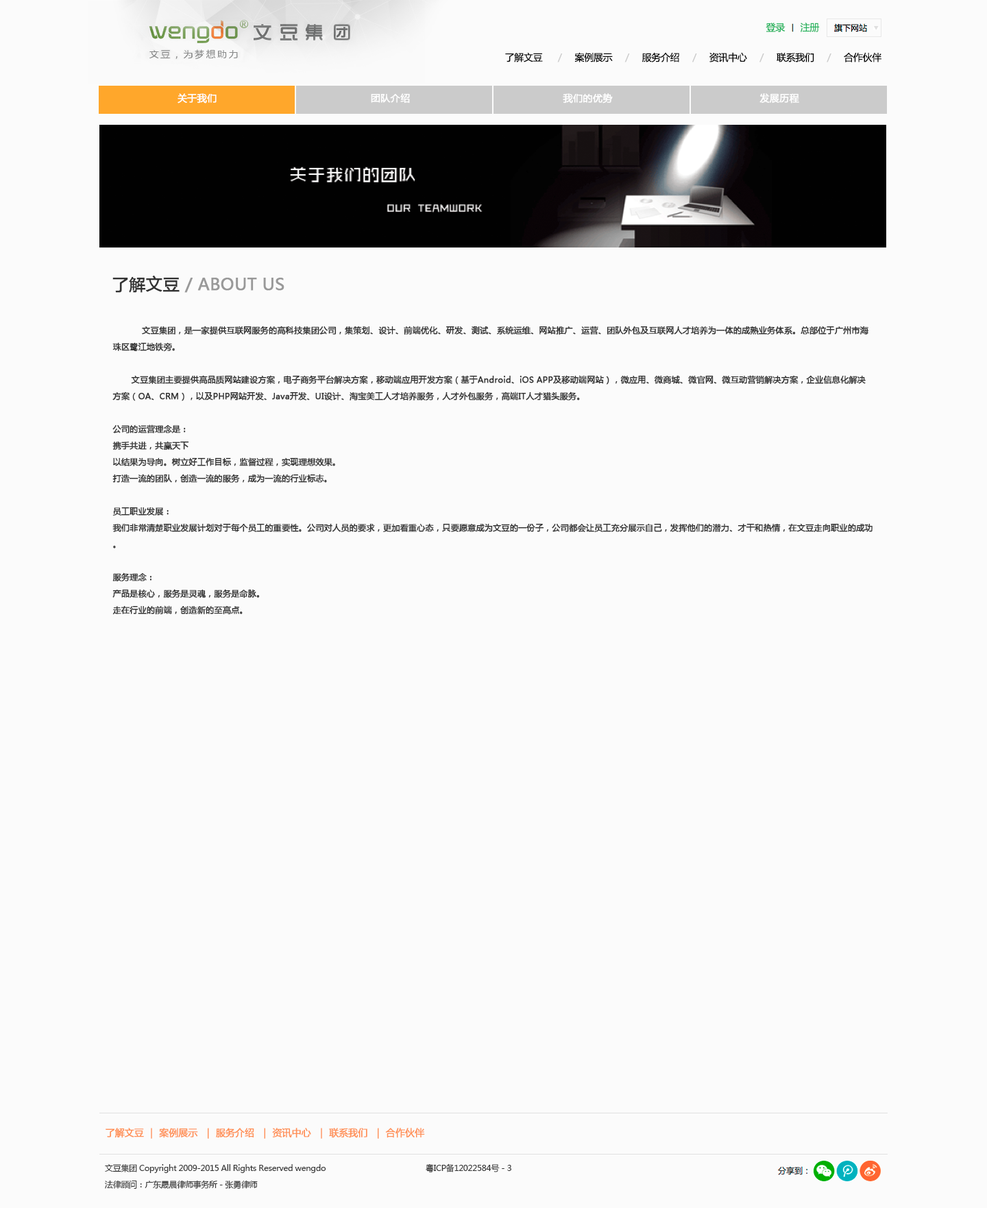
<style>
.page{position:relative;width:987px;height:1208px;background:#fbfbfb}
.page>*{position:absolute;margin:0}
.t1{font:9.6px "MicrosoftYaHei";letter-spacing:-0.025em;color:#23b35c}
.t2{font:9.6px "MicrosoftYaHei";letter-spacing:-0.025em;color:#010101}
.t3{font:9.6px "MicrosoftYaHei";letter-spacing:-0.025em;color:#cccccc}
.t4{font:9.6px "MicrosoftYaHei";color:#ffffff;font-weight:bold}
.t5{font:16.5px "MicrosoftYaHei";color:#999999;font-weight:bold}
.t6{font:16.5px "MicrosoftYaHei";color:#333333;font-weight:bold}
.t7{font:8.2px/16.5px "MicrosoftYaHei";color:#333333;font-weight:bold}
.t8{font:9.6px "MicrosoftYaHei";letter-spacing:-0.025em;color:#ff8f54;font-weight:bold}
.t9{font:8.2px/16.5px "MicrosoftYaHei";letter-spacing:-0.025em;color:#333333}
</style>
<div class="page">
<p class="t1" style="left:766px;top:23px;width:20px;height:9px">登录</p>
<p class="t1" style="left:800px;top:23px;width:20px;height:9px">注册</p>
<p class="t2" style="left:505px;top:52px;width:377px;height:10px">了解文豆      <span class="t3">/     </span>案例展示     <span class="t3">/     </span>服务介绍     <span class="t3">/     </span>资讯中心     <span class="t3">/     </span>联系我们     <span class="t3">/     </span>合作伙伴</p>
<p class="t4" style="left:178px;top:93px;width:39px;height:11px">关于我们</p>
<p class="t4" style="left:371px;top:93px;width:39px;height:11px">团队介绍</p>
<p class="t4" style="left:563px;top:93px;width:50px;height:11px">我们的优势</p>
<p class="t4" style="left:760px;top:93px;width:39px;height:11px">发展历程</p>
<p class="t5" style="left:112px;top:276px;width:172px;height:17px"><span class="t6">了解文豆</span> / ABOUT US</p>
<p class="t7" style="left:112px;top:326px;width:761px;height:289px">文豆集团，是一家提供互联网服务的高科技集团公司，集策划、设计、前端优化、研发、测试、系统运维、网站推广、运营、团队外包及互联网人才培养为一体的成熟业务体系。总部位于广州市海珠区鹭江地铁旁。<br><br>       文豆集团主要提供高品质网站建设方案，电子商务平台解决方案，移动端应用开发方案（基于Android、iOS APP及移动端网站），微应用、微商城、微官网、微互动营销解决方案，企业信息化解决方案（OA、CRM），以及PHP网站开发、Java开发、UI设计、淘宝美工人才培养服务，人才外包服务，高端IT人才猎头服务。<br><br>公司的运营理念是：<br>携手共进，共赢天下<br>以结果为导向。树立好工作目标，监督过程，实现理想效果。<br>打造一流的团队，创造一流的服务，成为一流的行业标志。<br><br>员工职业发展：<br>我们非常清楚职业发展计划对于每个员工的重要性。公司对人员的要求，更加看重心态，只要愿意成为文豆的一份子，公司都会让员工充分展示自己，发挥他们的潜力、才干和热情，在文豆走向职业的成功。<br><br>服务理念：<br>产品是核心，服务是灵魂，服务是命脉。<br>走在行业的前端，创造新的至高点。</p>
<p class="t8" style="left:106px;top:1128px;width:319px;height:11px">了解文豆 ｜ 案例展示  ｜ 服务介绍  ｜ 资讯中心  ｜ 联系我们  ｜ 合作伙伴</p>
<p class="t9" style="left:105px;top:1163px;width:406px;height:26px">文豆集团 Copyright 2009-2015 All Rights Reserved wengdo     粤ICP备12022584号－3<br>法律顾问：广东晟晨律师事务所－张勇律师</p>
</div>
